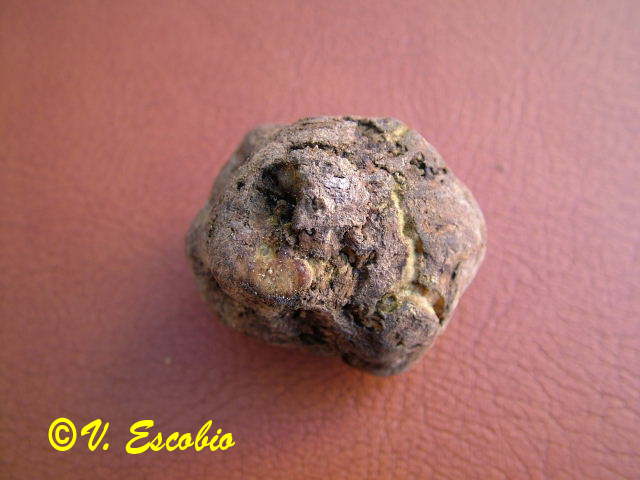
<style>
.page{position:relative;width:640px;height:480px}
.page>*{position:absolute;margin:0}
.t1{font:44.4px "BrushScriptStd";color:#ffff00;scale:0.86 1}
</style>
<div class="page">
<p class="t1" style="left:48px;top:417px;width:188px;height:37px">©V. Escobio</p>
</div>
